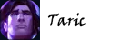
<style>
.page{position:relative;width:140px;height:40px;background:#ffffff}
.page>*{position:absolute;margin:0}
.t1{font:16px "VinerHandITC";color:#000000}
</style>
<div class="page">
<p class="t1" style="left:47px;top:13px;width:39px;height:14px">Taric</p>
</div>
